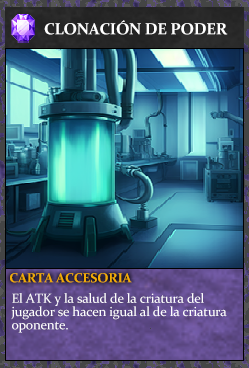
<style>
.page{position:relative;width:249px;height:368px}
.page>*{position:absolute;margin:0}
.t1{font:16px "Constantia-Bold";letter-spacing:-0.02em;color:#ffffff}
.t2{font:13.3px "Constantia-Bold";letter-spacing:-0.02em;color:#f2ac05}
.t3{font:13.3px/13.3px "Constantia";letter-spacing:-0.02em;color:#ffffff}
</style>
<div class="page">
<p class="t1" style="left:44px;top:20px;width:184px;height:15px">CLONACIÓN DE PODER</p>
<p class="t2" style="left:10px;top:273px;width:122px;height:10px">CARTA ACCESORIA</p>
<p class="t3" style="left:11px;top:293px;width:216px;height:40px">El ATK y la salud de la criatura del<br>jugador se hacen igual al de la criatura<br>oponente.</p>
</div>
